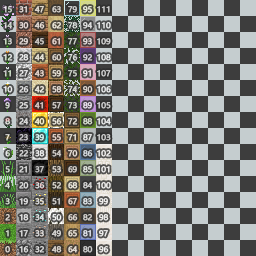
<style>
.page{position:relative;width:256px;height:256px;background:#3d3d3d}
.page>*{position:absolute;margin:0}
.t1{font:7.6px "MicrosoftYaHei";color:#d9e8d4;font-weight:bold}
.t2{font:7.6px "MicrosoftYaHei";color:#e6e3e3;font-weight:bold}
.t3{font:7.6px "MicrosoftYaHei";color:#e5e5e5;font-weight:bold}
.t4{font:7.6px "MicrosoftYaHei";color:#eadbd4;font-weight:bold}
.t5{font:7.6px "MicrosoftYaHei";font-weight:bold}
.t6{font:7.6px "MicrosoftYaHei";color:#d8d9d3;font-weight:bold}
.t7{font:7.6px "MicrosoftYaHei";color:#fafafa;font-weight:bold}
</style>
<div class="page">
<p class="t1" style="left:3px;top:6px;width:10px;height:247px;text-align:center">15<br>14<br>13<br>12<br>11<br>10<br>9<br>8<br>7<br>6<br>5<br>4<br>3<br>2<br>1<br>0</p>
<p class="t2" style="left:19px;top:6px;width:10px;height:247px;text-align:center">31<br>30<br>29<br>28<br>27<br>26<br>25<br>24<br>23<br>22<br>21<br>20<br>19<br>18<br>17<br>16</p>
<p class="t3" style="left:34px;top:6px;width:11px;height:247px;text-align:center">47<br>46<br>45<br>44<br>43<br>42<br>41<br>40<br>39<br>38<br>37<br>36<br>35<br>34<br>33<br>32</p>
<p class="t4" style="left:51px;top:6px;width:11px;height:247px;text-align:center">63<br>62<br>61<br>60<br>59<br>58<br>57<br>56<br>55<br>54<br>53<br>52<br>51<br>50<br>49<br>48</p>
<p class="t5" style="left:68px;top:6px;width:10px;height:247px;text-align:center">79<br>78<br>77<br>76<br>75<br>74<br>73<br>72<br>71<br>70<br>69<br>68<br>67<br>66<br>65<br>64</p>
<p class="t6" style="left:83px;top:6px;width:10px;height:247px;text-align:center">95<br>94<br>93<br>92<br>91<br>90<br>89<br>88<br>87<br>86<br>85<br>84<br>83<br>82<br>81<br>80</p>
<p class="t7" style="left:97px;top:6px;width:14px;height:247px;text-align:center">111<br>110<br>109<br>108<br>107<br>106<br>105<br>104<br>103<br>102<br>101<br>100<br>99<br>98<br>97<br>96</p>
</div>
